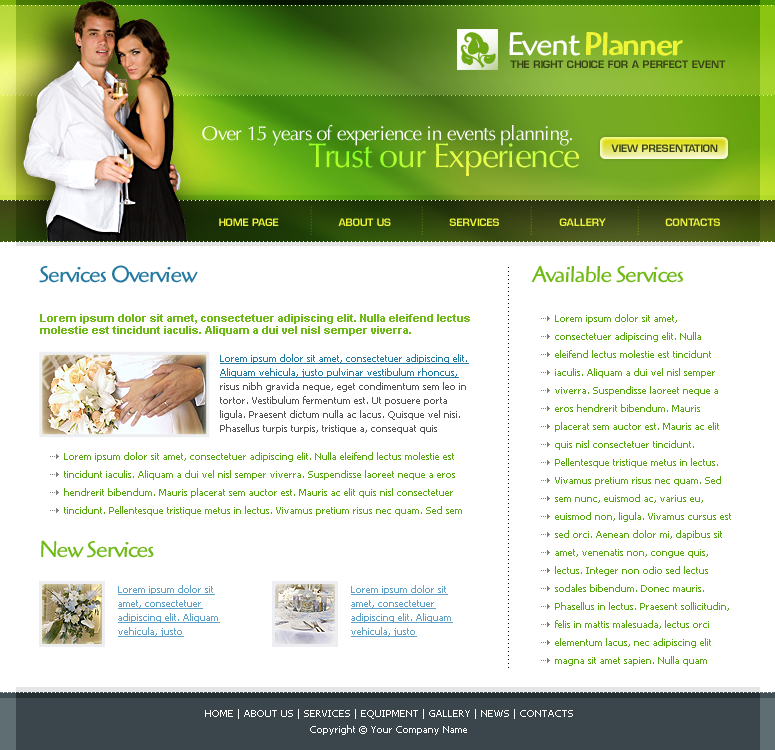
<style>
.page{position:relative;width:775px;height:750px;background:#ffffff}
.page>*{position:absolute;margin:0}
.t1{font:34px "HighlanderStd-Medium";letter-spacing:-0.04em;color:#eef538}
.t2{font:34px "HighlanderStd-Book";letter-spacing:-0.04em;color:#ffffff}
.t3{font:10px "EurostileLTStd-Demi";color:#384314;text-transform:uppercase}
.t4{font:20px "OptimaLTStd";letter-spacing:-0.04em;color:#ffffff}
.t5{font:34px "OptimaLTStd";letter-spacing:-0.04em}
.t6{font:8.3px "EurostileLTStd-Demi";text-transform:uppercase}
.t7{font:10px "EurostileLTStd-Demi";color:#eef538;text-transform:uppercase}
.t8{font:24px "HighlanderStd-Book";letter-spacing:-0.04em;color:#2479a0}
.t9{font:10px "TrebuchetMS";color:#000000}
.t10{font:24px "HighlanderStd-Book";letter-spacing:-0.04em;color:#70ba17}
.t11{font:11px/12px "Arial-BoldMT";color:#70ba17}
.t12{font:10px/18px "Tahoma";color:#5aa715}
.t13{font:10px/14px "Tahoma";color:#535353}
.t14{font:10px/14px "Tahoma";color:#2479a0;text-decoration:underline}
.t15{font:10px/14px "Tahoma";color:#5fa1c9;text-decoration:underline}
.t16{font:10px/16px "Tahoma";color:#ffffff}
</style>
<div class="page">
<p class="t1" style="left:509px;top:32px;width:174px;height:24px"><span class="t2">Event </span>Planner</p>
<p class="t3" style="left:510px;top:60px;width:216px;height:8px">THE RIGHT CHOICE FOR A PERFECT EVENT</p>
<p class="t4" style="left:202px;top:124px;width:370px;height:22px">Over 15 years of experience in events planning.</p>
<p class="t5" style="left:308px;top:143px;width:271px;height:33px">Trust our Experience</p>
<p class="t3" style="left:611px;top:144px;width:107px;height:8px">VIEW PRESENTATION</p>
<p class="t6" style="left:310px;top:206px;width:2px;height:29px;rotate:90deg">..........</p>
<p class="t6" style="left:421px;top:206px;width:2px;height:29px;rotate:90deg">..........</p>
<p class="t6" style="left:530px;top:206px;width:2px;height:29px;rotate:90deg">..........</p>
<p class="t6" style="left:637px;top:206px;width:2px;height:29px;rotate:90deg">..........</p>
<p class="t7" style="left:219px;top:218px;width:60px;height:8px">HOME PAGE</p>
<p class="t7" style="left:338px;top:218px;width:53px;height:8px">ABOUT US</p>
<p class="t7" style="left:449px;top:218px;width:50px;height:8px">SERVICES</p>
<p class="t7" style="left:559px;top:218px;width:47px;height:8px">GALLERY</p>
<p class="t7" style="left:665px;top:218px;width:55px;height:8px">CONTACTS</p>
<p class="t8" style="left:39px;top:265px;width:159px;height:18px">Services Overview</p>
<p class="t9" style="left:508px;top:267px;width:1px;height:401px;rotate:90deg">.....................................................................................................</p>
<p class="t10" style="left:531px;top:265px;width:152px;height:18px">Available Services</p>
<p class="t11" style="left:40px;top:314px;width:430px;height:22px">Lorem ipsum dolor sit amet, consectetuer adipiscing elit. Nulla eleifend lectus molestie est tincidunt iaculis. Aliquam a dui vel nisl semper viverra.</p>
<p class="t12" style="left:555px;top:314px;width:176px;height:352px">Lorem ipsum dolor sit amet, consectetuer adipiscing elit. Nulla eleifend lectus molestie est tincidunt iaculis. Aliquam a dui vel nisl semper viverra. Suspendisse laoreet neque a eros hendrerit bibendum. Mauris placerat sem auctor est. Mauris ac elit quis nisl consectetuer tincidunt. Pellentesque tristique metus in lectus. Vivamus pretium risus nec quam. Sed sem nunc, euismod ac, varius eu, euismod non, ligula. Vivamus cursus est sed orci. Aenean dolor mi, dapibus sit amet, venenatis non, congue quis, lectus. Integer non odio sed lectus sodales bibendum. Donec mauris. Phasellus in lectus. Praesent sollicitudin, felis in mattis malesuada, lectus orci elementum lacus, nec adipiscing elit magna sit amet sapien. Nulla quam</p>
<p class="t13" style="left:220px;top:354px;width:249px;height:80px"><span class="t14">Lorem ipsum dolor sit amet, consectetuer adipiscing elit. Aliquam vehicula, justo pulvinar vestibulum rhoncus, </span>risus nibh gravida neque, eget condimentum sem leo in tortor. Vestibulum fermentum est. Ut posuere porta ligula. Praesent dictum nulla ac lacus. Quisque vel nisi. Phasellus turpis turpis, tristique a, consequat quis</p>
<p class="t12" style="left:64px;top:452px;width:398px;height:64px">Lorem ipsum dolor sit amet, consectetuer adipiscing elit. Nulla eleifend lectus molestie est tincidunt iaculis. Aliquam a dui vel nisl semper viverra. Suspendisse laoreet neque a eros hendrerit bibendum. Mauris placerat sem auctor est. Mauris ac elit quis nisl consectetuer tincidunt. Pellentesque tristique metus in lectus. Vivamus pretium risus nec quam. Sed sem</p>
<p class="t10" style="left:41px;top:540px;width:113px;height:18px">New Services</p>
<p class="t15" style="left:118px;top:585px;width:102px;height:52px">Lorem ipsum dolor sit amet, consectetuer adipiscing elit. Aliquam vehicula, justo</p>
<p class="t15" style="left:351px;top:585px;width:102px;height:52px">Lorem ipsum dolor sit amet, consectetuer adipiscing elit. Aliquam vehicula, justo</p>
<p class="t16" style="left:205px;top:709px;width:368px;height:26px;text-align:center">HOME | ABOUT US | SERVICES | EQUIPMENT | GALLERY | NEWS | CONTACTS<br>Copyright © Your Company Name</p>
</div>
